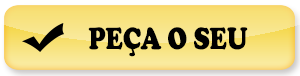
<style>
.page{position:relative;width:300px;height:76px}
.page>*{position:absolute;margin:0}
.t1{font:31.8px "CooperBlack";color:#000000;text-transform:uppercase;scale:0.79 1}
</style>
<div class="page">
<p class="t1" style="left:88px;top:27px;width:160px;height:30px">Peça o seu</p>
</div>
